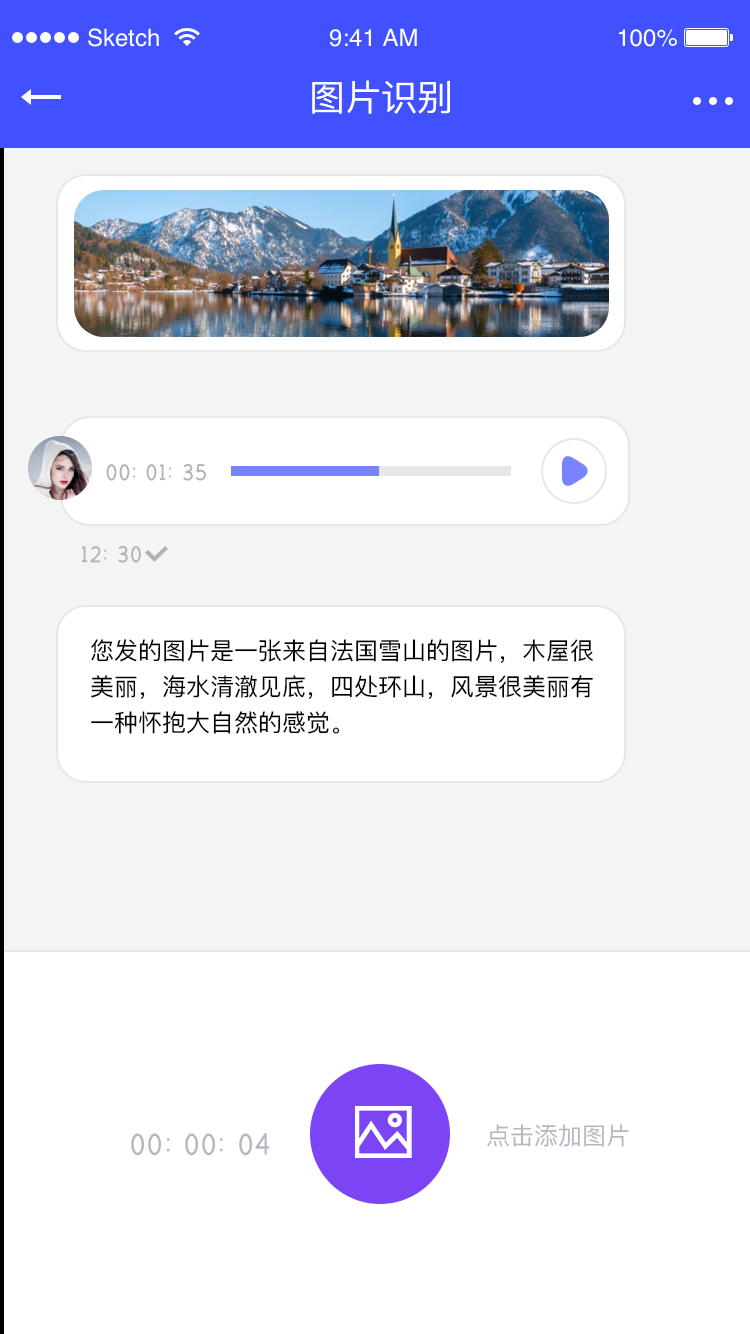
<style>
.page{position:relative;width:750px;height:1334px;background:#ffffff}
.page>*{position:absolute;margin:0}
.t1{font:36px "PingFang-SC-Medium";color:#ffffff}
.t2{font:24px "59--Regular";color:#b2b2b2}
.t3{font:24px/36px "PingFang-SC-Medium";color:#000000}
.t4{font:32px "59--Regular";color:#b5b8c1}
.t5{font:24px "PingFang-SC-Medium";color:#b5b8c1}
</style>
<div class="page">
<p class="t1" style="left:312px;top:80px;width:138px;height:34px">图片识别</p>
<p class="t2" style="left:106px;top:463px;width:100px;height:18px">00:01:35</p>
<p class="t2" style="left:81px;top:545px;width:60px;height:18px">12:30</p>
<p class="t3" style="left:91px;top:639px;width:502px;height:95px">您发的图片是一张来自法国雪山的图片，木屋很美丽，海水清澈见底，四处环山，风景很美丽有一种怀抱大自然的感觉。</p>
<p class="t4" style="left:131px;top:1133px;width:139px;height:23px">00:00:04</p>
<p class="t5" style="left:487px;top:1124px;width:142px;height:23px">点击添加图片</p>
</div>
